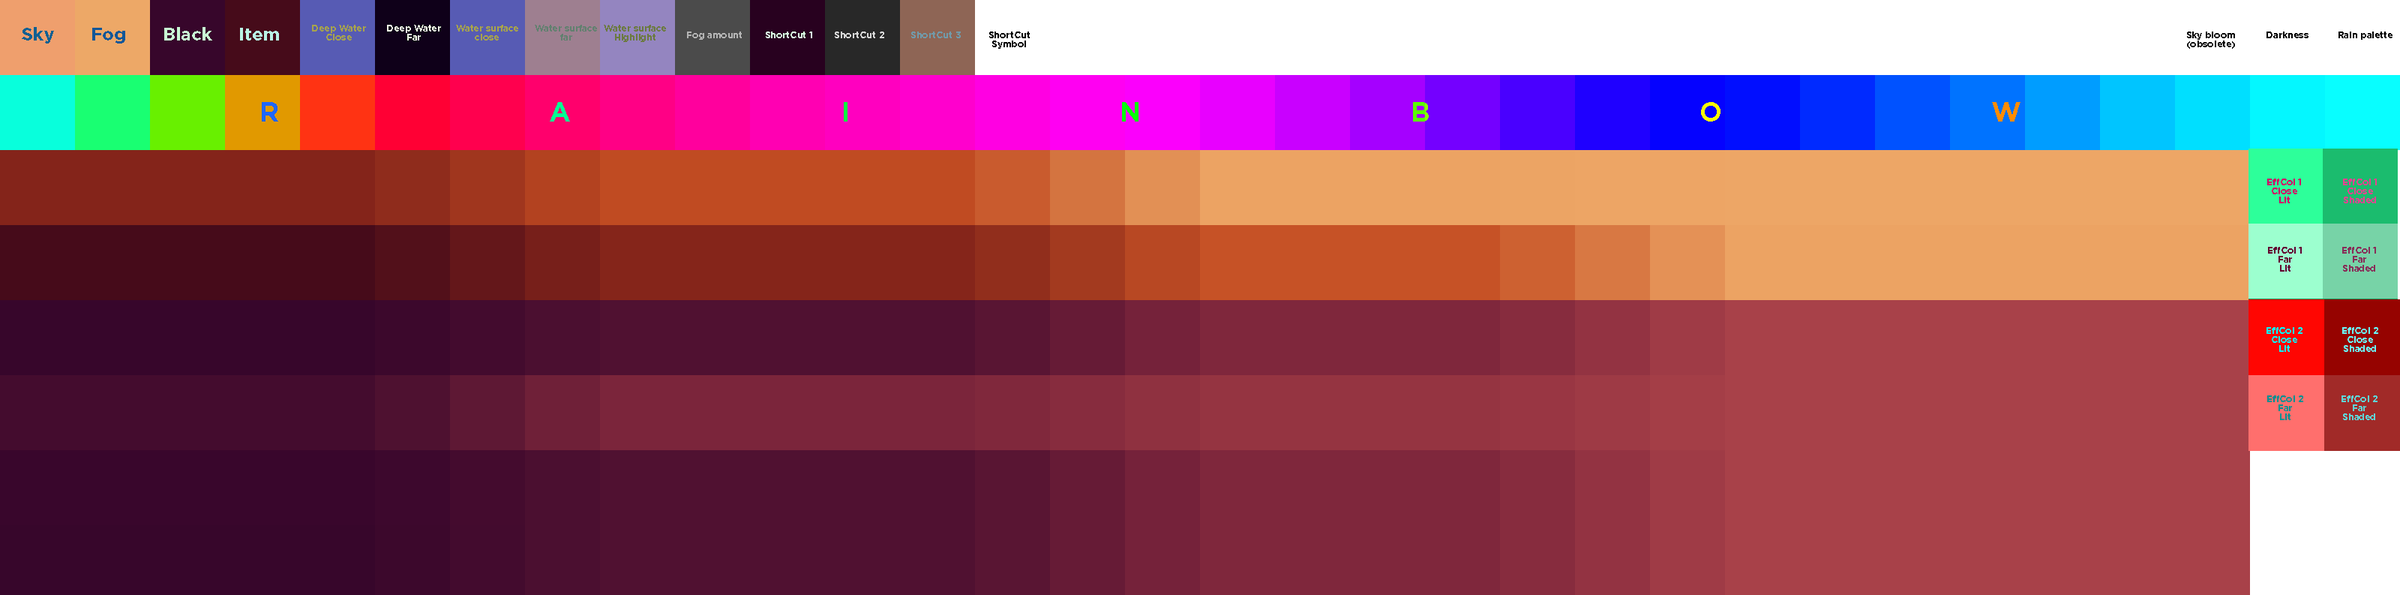
<style>
.page{position:relative;width:2400px;height:595px}
.page>*{position:absolute;margin:0}
.t1{font:18px "Gotham-Bold";color:#106092}
.t2{font:18px "Gotham-Bold";color:#125798}
.t3{font:18px "Gotham-Bold";color:#c8f9d4}
.t4{font:18px "Gotham-Bold";color:#b9f4e5}
.t5{font:9px/9px "Gotham-Bold";color:#a8a44b}
.t6{font:9px/9px "Gotham-Bold";color:#f0ffe6}
.t7{font:9px/9px "Gotham-Bold";color:#61806f}
.t8{font:9px/9px "Gotham-Bold";color:#6b7a3f}
.t9{font:9px "Gotham-Bold";color:#b4b4b4}
.t10{font:9px "Gotham-Bold";color:#d7fee0}
.t11{font:9px "Gotham-Bold";color:#d7d7d7}
.t12{font:9px "Gotham-Bold";color:#719aaa}
.t13{font:9px/9px "Gotham-Bold";color:#000000}
.t14{font:9px "Gotham-Bold";color:#000000}
.t15{font:27px "Gotham-Bold";letter-spacing:10em}
.t16{font:9px/9px "Gotham-Bold";color:#d20065}
.t17{font:9px/9px "Gotham-Bold";color:#e44391}
.t18{font:9px/9px "Gotham-Bold";color:#630030}
.t19{font:9px/9px "Gotham-Bold";color:#882c58}
.t20{font:9px/9px "Gotham-Bold";color:#00f9fd}
.t21{font:9px/9px "Gotham-Bold";color:#69fcff}
.t22{font:9px/9px "Gotham-Bold";color:#009092}
.t23{font:9px/9px "Gotham-Bold";color:#5ed5d7}
</style>
<div class="page">
<p class="t1" style="left:22px;top:27px;width:32px;height:17px">Sky</p>
<p class="t2" style="left:92px;top:28px;width:33px;height:16px">Fog</p>
<p class="t3" style="left:164px;top:27px;width:48px;height:13px">Black</p>
<p class="t4" style="left:240px;top:28px;width:39px;height:12px">Item</p>
<p class="t5" style="left:312px;top:25px;width:54px;height:15px;text-align:center">Deep Water <br>Close</p>
<p class="t6" style="left:387px;top:25px;width:54px;height:15px;text-align:center">Deep Water <br>Far</p>
<p class="t5" style="left:456px;top:25px;width:62px;height:15px;text-align:center">Water surface<br>close</p>
<p class="t7" style="left:535px;top:25px;width:62px;height:15px;text-align:center">Water surface<br>far</p>
<p class="t8" style="left:604px;top:25px;width:62px;height:17px;text-align:center">Water surface<br>Highlight</p>
<p class="t9" style="left:687px;top:32px;width:55px;height:8px">Fog amount</p>
<p class="t10" style="left:766px;top:32px;width:46px;height:6px">ShortCut 1</p>
<p class="t11" style="left:835px;top:32px;width:49px;height:6px">ShortCut 2</p>
<p class="t12" style="left:911px;top:32px;width:50px;height:6px">ShortCut 3</p>
<p class="t13" style="left:989px;top:32px;width:41px;height:17px;text-align:center">ShortCut <br>Symbol</p>
<p class="t13" style="left:2187px;top:32px;width:48px;height:17px;text-align:center">Sky bloom<br>(obsolete)</p>
<p class="t14" style="left:2266px;top:32px;width:42px;height:6px">Darkness</p>
<p class="t14" style="left:2338px;top:32px;width:54px;height:8px">Rain palette</p>
<p class="t15" style="left:262px;top:102px;width:1758px;height:20px">RAINBOW</p>
<p class="t16" style="left:2267px;top:178px;width:34px;height:25px;text-align:center">EffCol 1<br>Close<br>Lit</p>
<p class="t17" style="left:2343px;top:178px;width:34px;height:25px;text-align:center">EffCol 1<br>Close<br>Shaded</p>
<p class="t18" style="left:2268px;top:247px;width:34px;height:25px;text-align:center">EffCol 1<br>Far<br>Lit</p>
<p class="t19" style="left:2342px;top:247px;width:34px;height:25px;text-align:center">EffCol 1<br>Far<br>Shaded</p>
<p class="t20" style="left:2266px;top:327px;width:36px;height:25px;text-align:center">EffCol 2<br>Close<br>Lit</p>
<p class="t21" style="left:2342px;top:327px;width:36px;height:25px;text-align:center">EffCol 2<br>Close<br>Shaded</p>
<p class="t22" style="left:2267px;top:395px;width:36px;height:25px;text-align:center">EffCol 2<br>Far<br>Lit</p>
<p class="t23" style="left:2342px;top:395px;width:36px;height:25px;text-align:center">EffCol 2<br>Far<br>Shaded</p>
</div>
